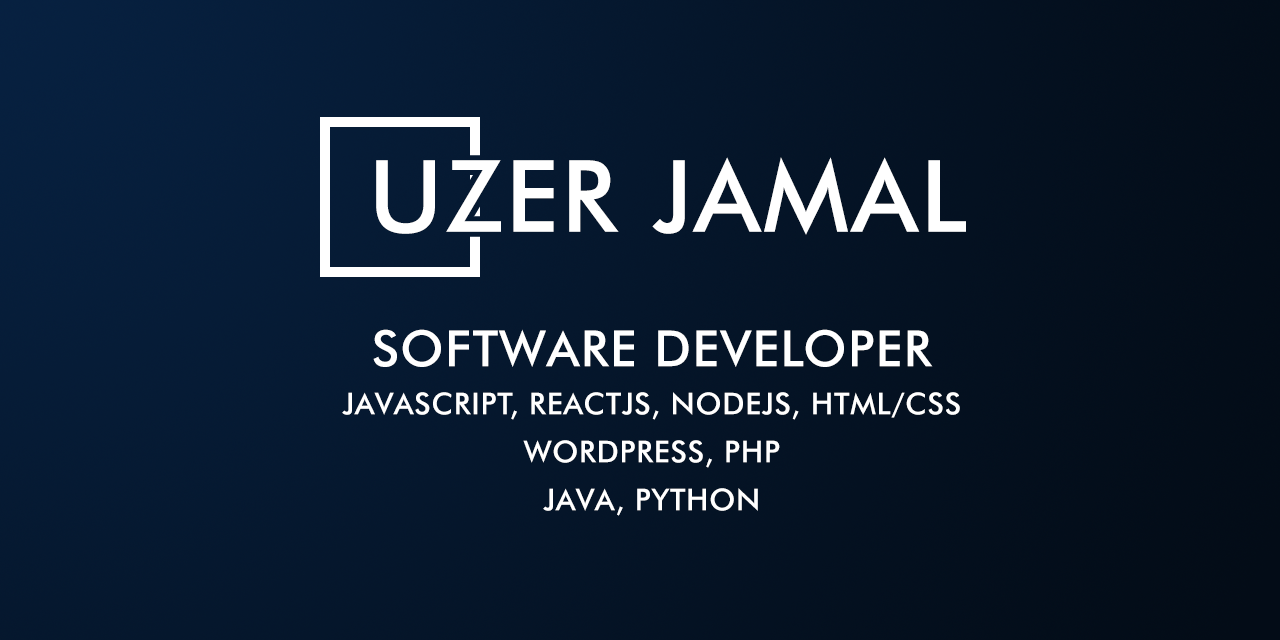
<style>
.page{position:relative;width:1280px;height:640px}
.page>*{position:absolute;margin:0}
.t1{font:100px "FuturaBT-Medium";letter-spacing:0.025em;color:#ffffff}
.t2{font:30px/48px "FuturaBT-Medium";letter-spacing:0.025em;color:#ffffff}
.t3{font:50px/48px "FuturaBT-Medium";letter-spacing:0.025em;color:#ffffff}
</style>
<div class="page">
<p class="t1" style="left:376px;top:157px;width:590px;height:78px">UZER JAMAL</p>
<p class="t2" style="left:342px;top:329px;width:618px;height:187px;text-align:center"><span class="t3">SOFTWARE DEVELOPER<br></span>JAVASCRIPT, REACTJS, NODEJS, HTML/CSS<br>WORDPRESS, PHP<br>JAVA, PYTHON</p>
</div>
